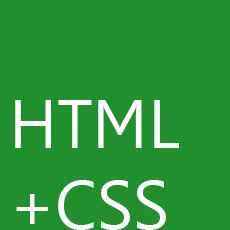
<style>
.page{position:relative;width:230px;height:230px;background:#218f2e}
.page>*{position:absolute;margin:0}
.t1{font:67.7px "Leelawadee";color:#ffffff}
</style>
<div class="page">
<p class="t1" style="left:15px;top:100px;width:164px;height:130px">HTML<br>+CSS</p>
</div>
